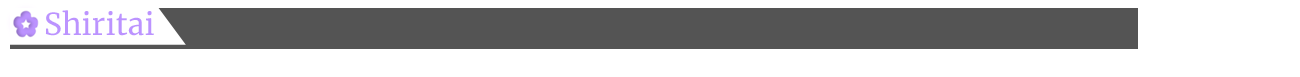
<style>
.page{position:relative;width:1300px;height:77px;background:#ffffff}
.page>*{position:absolute;margin:0}
.t1{font:30px "Merriweather-Regular";color:#bc93ff}
</style>
<div class="page">
<p class="t1" style="left:45px;top:10px;width:109px;height:26px">Shiritai</p>
</div>
